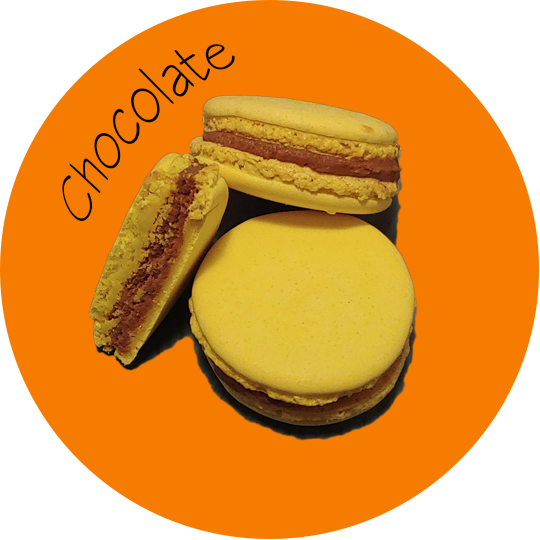
<style>
.page{position:relative;width:540px;height:540px;background:#f57c00}
.page>*{position:absolute;margin:0}
.t1{font:52px "StylusBT";color:#000000}
</style>
<div class="page">
<p class="t1" style="left:62px;top:44px;width:173px;height:177px;rotate:-45deg">Chocolate</p>
</div>
